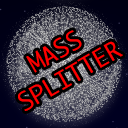
<style>
.page{position:relative;width:128px;height:128px}
.page>*{position:absolute;margin:0}
.t1{font:24px "Monaco";color:#ff0000;text-transform:uppercase}
</style>
<div class="page">
<p class="t1" style="left:18px;top:30px;width:105px;height:81px;text-align:center;rotate:-30deg">Mass<br>Splitter</p>
</div>
